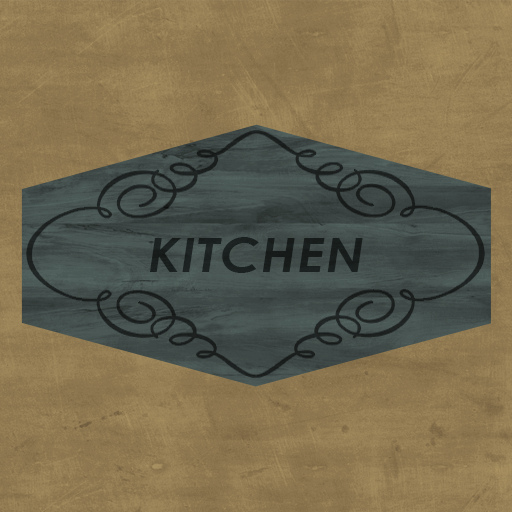
<style>
.page{position:relative;width:512px;height:512px}
.page>*{position:absolute;margin:0}
.t1{font:48px "CenturyGothic-BoldItalic";letter-spacing:0.025em;color:#191f1d;text-transform:uppercase;scale:1.07 1}
</style>
<div class="page">
<p class="t1" style="left:150px;top:237px;width:213px;height:36px">Kitchen</p>
</div>
